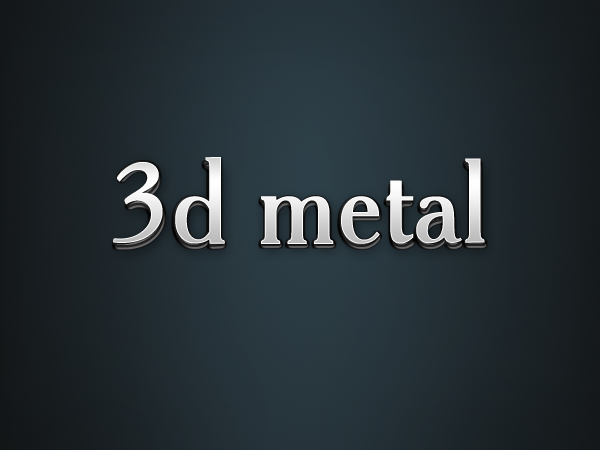
<style>
.page{position:relative;width:600px;height:450px}
.page>*{position:absolute;margin:0}
.t1{font:115.4px "CheltenhamBT-Roman"}
</style>
<div class="page">
<p class="t1" style="left:113px;top:157px;width:372px;height:87px">3d metal</p>
<p class="t1" style="left:114px;top:163px;width:371px;height:85px">3d metal</p>
</div>
